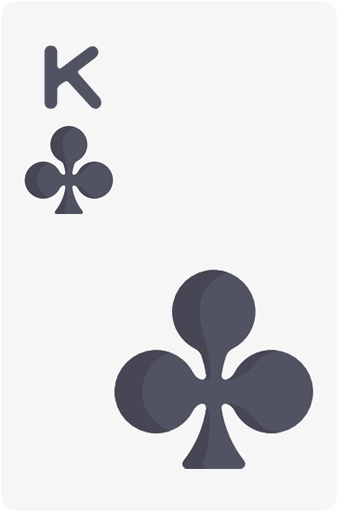
<style>
.page{position:relative;width:338px;height:512px;background:#f6f6f6}
.page>*{position:absolute;margin:0}
.t1{font:72px "JPTY";letter-spacing:0.075em;color:#515362}
</style>
<div class="page">
<p class="t1" style="left:44px;top:45px;width:58px;height:64px">K</p>
</div>
